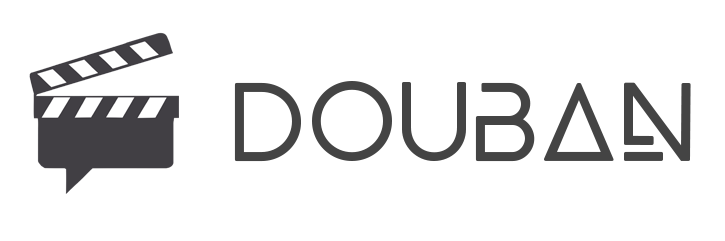
<style>
.page{position:relative;width:725px;height:241px;background:#ffffff}
.page>*{position:absolute;margin:0}
.t1{font:108.5px "BEYNO";color:#444444}
</style>
<div class="page">
<p class="t1" style="left:234px;top:81px;width:457px;height:81px">Douban</p>
</div>
